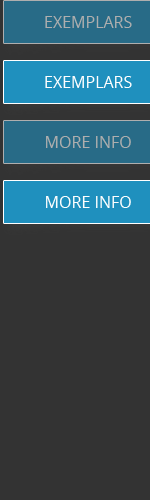
<style>
.page{position:relative;width:150px;height:500px;background:#333333}
.page>*{position:absolute;margin:0}
.t1{font:16px "OpenSans";color:#aeaeae;text-transform:uppercase}
.t2{font:16px "OpenSans";color:#ffffff;text-transform:uppercase}
</style>
<div class="page">
<p class="t1" style="left:45px;top:16px;width:87px;height:12px">exemplars</p>
<p class="t2" style="left:45px;top:76px;width:87px;height:12px">exemplars</p>
<p class="t1" style="left:46px;top:136px;width:85px;height:12px">more info</p>
<p class="t2" style="left:46px;top:196px;width:85px;height:12px">more info</p>
</div>
